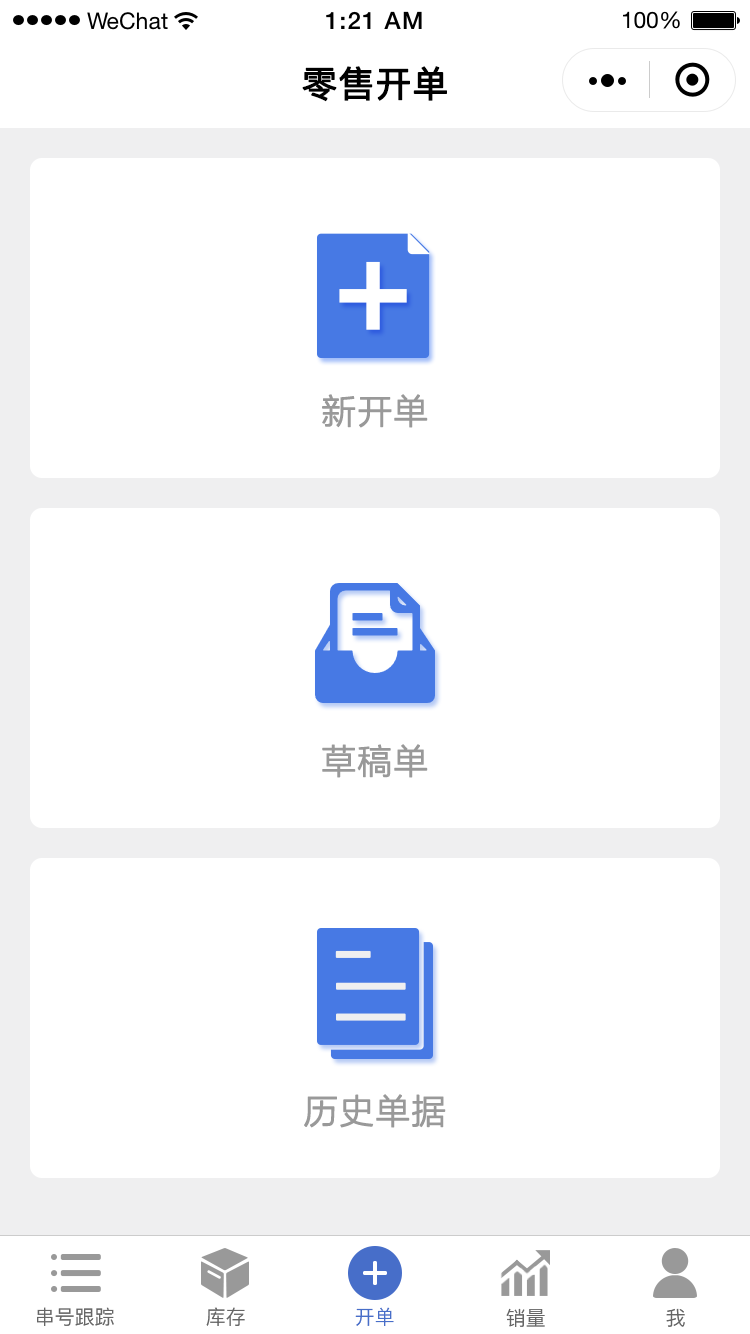
<style>
.page{position:relative;width:750px;height:1334px;background:#ffffff}
.page>*{position:absolute;margin:0}
.t1{font:36px "PingFang-SC-Medium";color:#000000;font-weight:bold}
.t2{font:34px "STHeitiSC-Medium";color:#999999;font-weight:bold}
.t3{font:20px "PingFang-SC-Medium";color:#666666}
.t4{font:20px "PingFang-SC-Medium";color:#476ec9}
</style>
<div class="page">
<p class="t1" style="left:302px;top:66px;width:145px;height:36px">零售开单</p>
<p class="t2" style="left:322px;top:394px;width:106px;height:34px">新开单</p>
<p class="t2" style="left:322px;top:744px;width:106px;height:34px">草稿单</p>
<p class="t2" style="left:304px;top:1094px;width:142px;height:34px">历史单据</p>
<p class="t3" style="left:37px;top:1307px;width:77px;height:19px">串号跟踪</p>
<p class="t3" style="left:206px;top:1307px;width:39px;height:19px">库存</p>
<p class="t4" style="left:355px;top:1307px;width:39px;height:19px">开单</p>
<p class="t3" style="left:506px;top:1308px;width:39px;height:19px">销量</p>
<p class="t3" style="left:666px;top:1308px;width:19px;height:19px">我</p>
</div>
